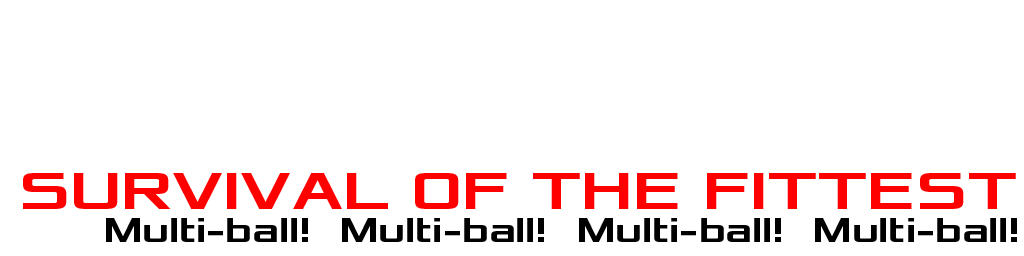
<style>
.page{position:relative;width:1024px;height:256px;background:#ffffff}
.page>*{position:absolute;margin:0}
.t1{font:55px "Xolonium-Bold";color:#ff0000}
.t2{font:36px "Xolonium-Bold";color:#000000}
</style>
<div class="page">
<p class="t1" style="left:23px;top:173px;width:993px;height:36px">SURVIVAL OF THE FITTEST</p>
<p class="t2" style="left:106px;top:218px;width:911px;height:24px">Multi-ball!  Multi-ball!  Multi-ball!  Multi-ball!</p>
</div>
